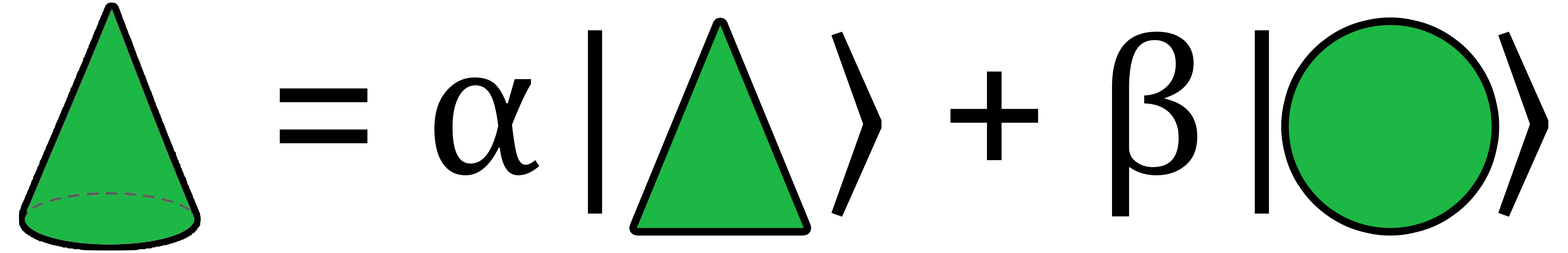
<style>
.page{position:relative;width:1568px;height:253px;background:#ffffff}
.page>*{position:absolute;margin:0}
.t1{font:202.3px "Cambria";color:#000000}
.t2{font:202.3px "SitkaSmall-Italic";color:#000000}
</style>
<div class="page">
<p class="t1" style="left:280px;top:30px;width:1269px;height:187px">= α<span class="t2">|</span>    ⟩ + β<span class="t2">|</span>    ⟩</p>
</div>
